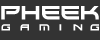
<style>
.page{position:relative;width:100px;height:40px;background:#333333}
.page>*{position:absolute;margin:0}
.t1{font:19.5px "Xirod-Regular";color:#ffffff}
.t2{font:9px "Xirod-Regular";color:#ffffff}
</style>
<div class="page">
<p class="t1" style="left:1px;top:6px;width:98px;height:14px">pheek</p>
<p class="t2" style="left:1px;top:24px;width:9px;height:7px">g</p>
<p class="t2" style="left:20px;top:24px;width:9px;height:7px">a</p>
<p class="t2" style="left:39px;top:24px;width:11px;height:7px">m</p>
<p class="t2" style="left:59px;top:24px;width:3px;height:7px">i</p>
<p class="t2" style="left:73px;top:24px;width:10px;height:7px">n</p>
<p class="t2" style="left:90px;top:24px;width:9px;height:7px">g</p>
</div>
